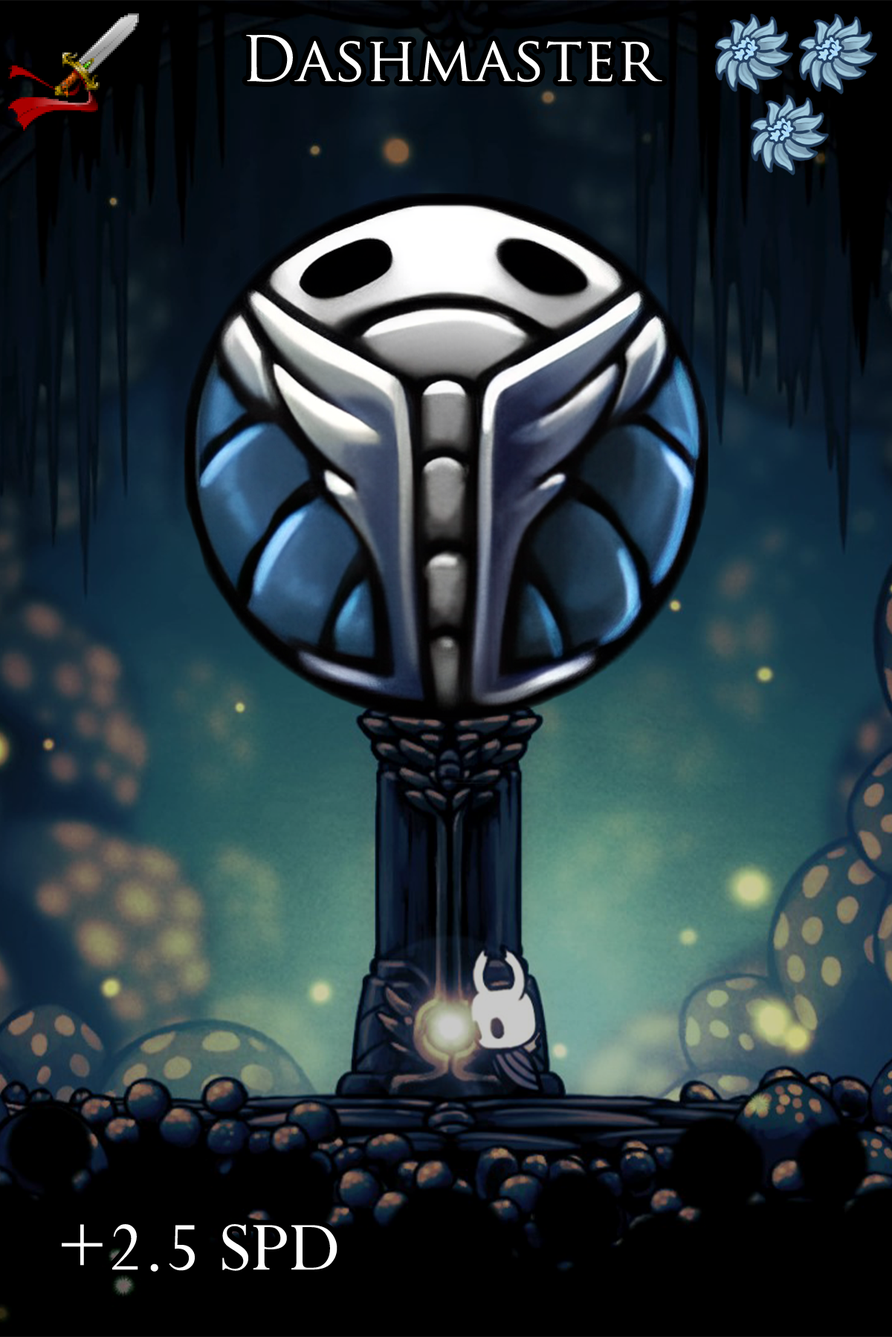
<style>
.page{position:relative;width:892px;height:1337px}
.page>*{position:absolute;margin:0}
.t1{font:104.8px "TrajanPro-Regular";color:#ffffff}
.t2{font:132.3px "Perpetua";color:#ffffff}
</style>
<div class="page">
<p class="t1" style="left:246px;top:35px;width:416px;height:47px">Dashmaster</p>
<p class="t2" style="left:62px;top:1224px;width:275px;height:48px">+2.5 SPD</p>
</div>
